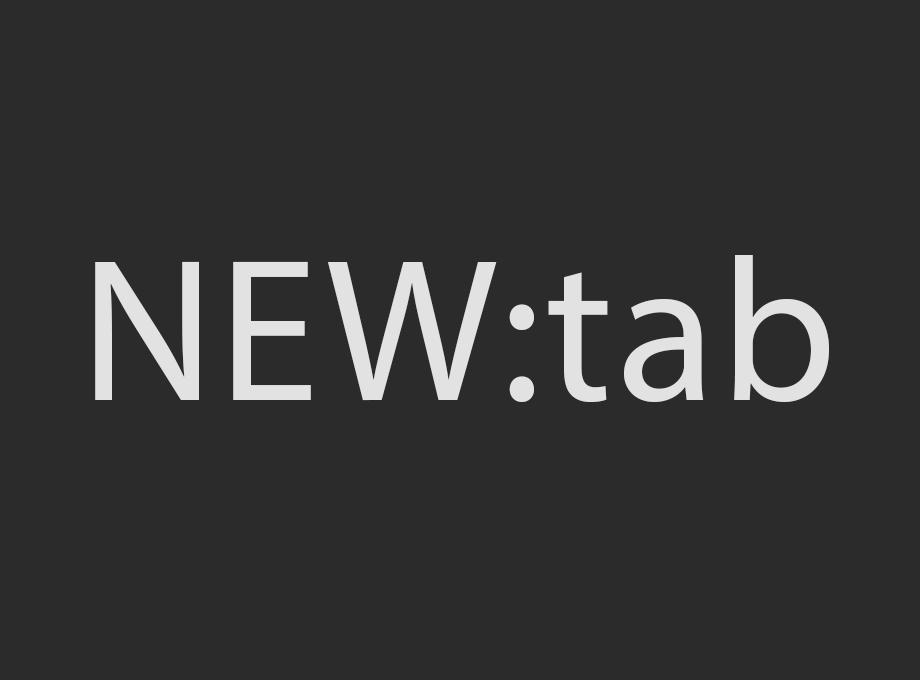
<style>
.page{position:relative;width:920px;height:680px;background:#2b2b2b}
.page>*{position:absolute;margin:0}
.t1{font:204.5px "MyriadPro-Regular";letter-spacing:0.02em;color:#e2e2e2}
</style>
<div class="page">
<p class="t1" style="left:95px;top:255px;width:734px;height:147px">NEW:tab</p>
</div>
